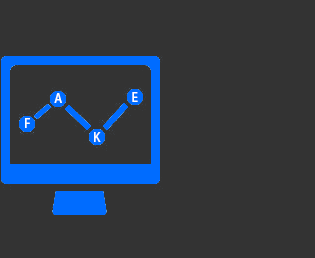
<style>
.page{position:relative;width:315px;height:258px;background:#333333}
.page>*{position:absolute;margin:0}
.t1{font:12px "AdobeHeitiStd-Regular";color:#fefefe}
.t2{font:12px "AdobeHeitiStd-Regular";color:#ffffff}
.t3{font:12px "AdobeHeitiStd-Regular";color:#fffefe}
.t4{font:12px "AdobeHeitiStd-Regular";color:#fffcfc}
</style>
<div class="page">
<p class="t1" style="left:54px;top:93px;width:8px;height:10px">A</p>
<p class="t2" style="left:132px;top:92px;width:6px;height:10px">E</p>
<p class="t3" style="left:25px;top:118px;width:5px;height:10px">F</p>
<p class="t4" style="left:94px;top:132px;width:7px;height:10px">K</p>
</div>
